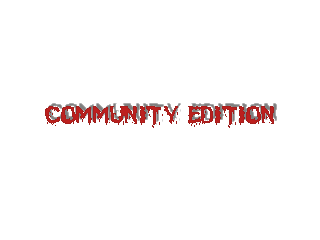
<style>
.page{position:relative;width:320px;height:240px;background:#ffffff}
.page>*{position:absolute;margin:0}
.t1{font:21px "BloodFeast";letter-spacing:0.02em;color:#ac1f1d}
.t2{font:21px "BloodFeast";letter-spacing:0.02em}
</style>
<div class="page">
<p class="t1" style="left:45px;top:106px;width:229px;height:22px">Community Edition</p>
<p class="t2" style="left:48px;top:103px;width:229px;height:22px">Community Edition</p>
</div>
